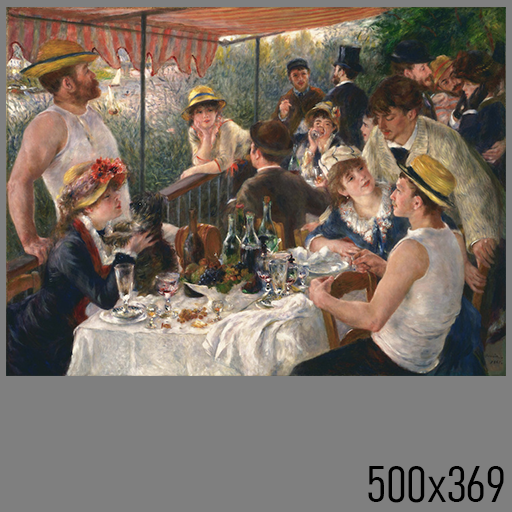
<style>
.page{position:relative;width:512px;height:512px;background:#7f7f7f}
.page>*{position:absolute;margin:0}
.t1{font:50px "Bahnschrift-LightCondensed";color:#000000}
</style>
<div class="page">
<p class="t1" style="left:368px;top:466px;width:136px;height:37px">500x369</p>
</div>
